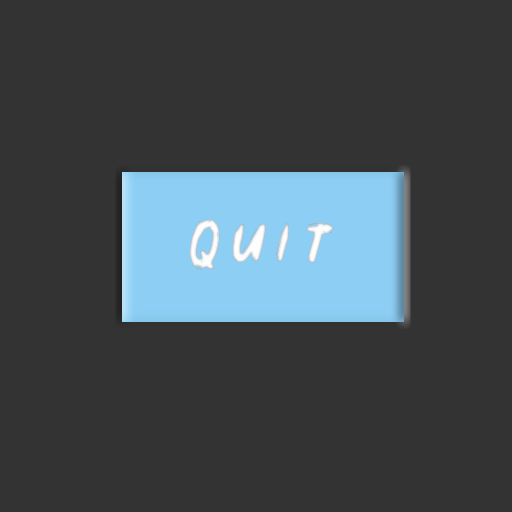
<style>
.page{position:relative;width:512px;height:512px;background:#333333}
.page>*{position:absolute;margin:0}
.t1{font:71.3px "Dirty-Brush";letter-spacing:0.22em;color:#fffefe;scale:0.89 1}
</style>
<div class="page">
<p class="t1" style="left:189px;top:219px;width:145px;height:51px">Quit</p>
</div>
